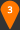
<style>
.page{position:relative;width:20px;height:30px;background:#ff7800}
.page>*{position:absolute;margin:0}
.t1{font:9px "OpenSans";color:#ffffff;font-weight:bold}
</style>
<div class="page">
<p class="t1" style="left:7px;top:6px;width:6px;height:8px">3</p>
</div>
